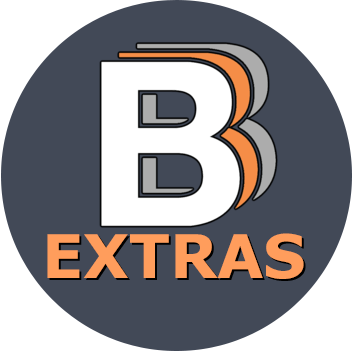
<style>
.page{position:relative;width:352px;height:351px;background:#424957}
.page>*{position:absolute;margin:0}
.t1{font:60px "Verdana-Bold";color:#ff9d5c}
</style>
<div class="page">
<p class="t1" style="left:47px;top:233px;width:257px;height:46px">EXTRAS</p>
</div>
